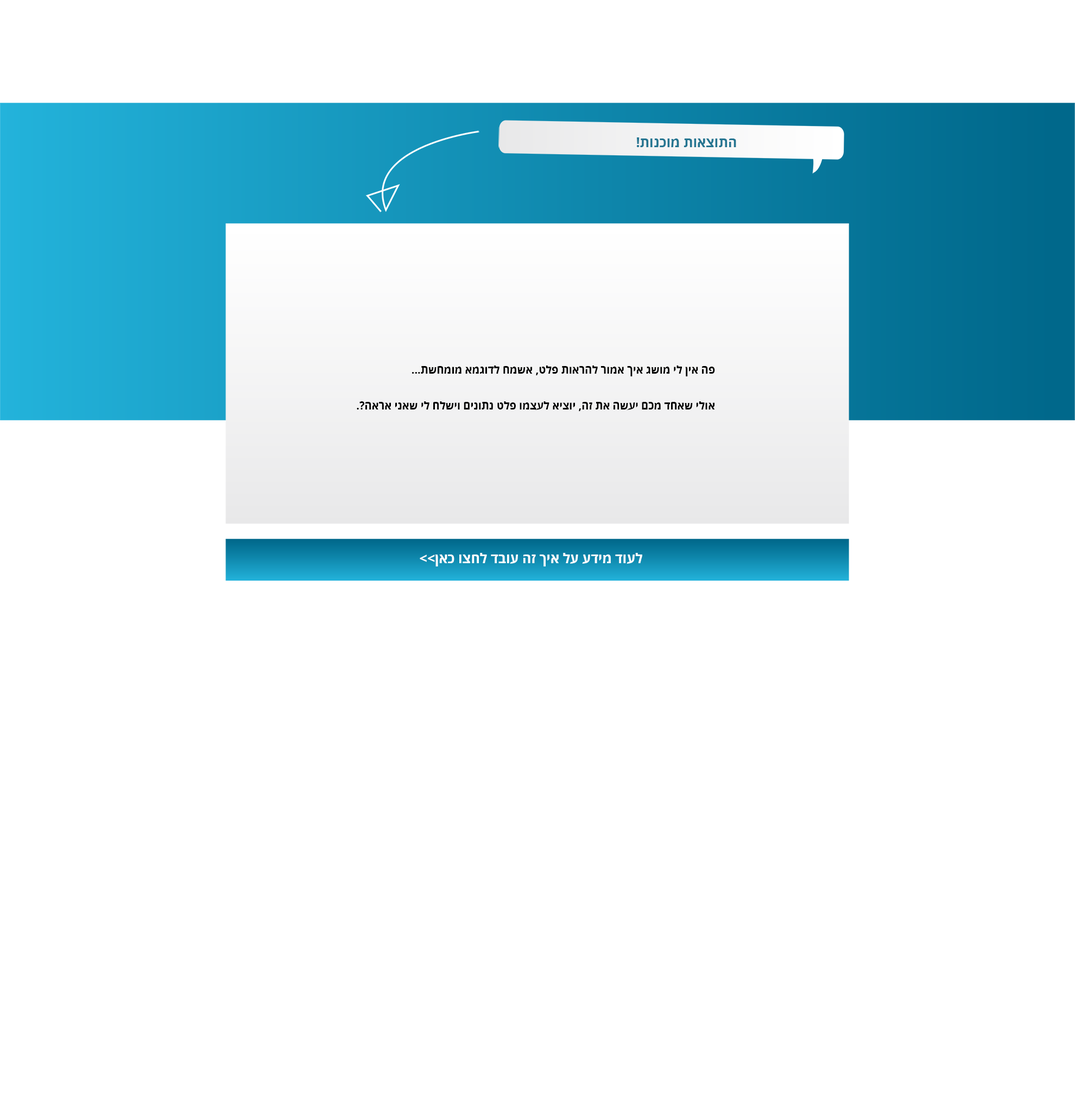
<style>
.page{position:relative;width:1075px;height:1109px;background:#ffffff}
.page>*{position:absolute;margin:0}
.t1{font:13.6px "OpenSansHebrew-Bold";color:#247591}
.t2{font:10.9px/35.8px "OpenSansHebrew-Bold";color:#000000}
.t3{font:13.6px "OpenSansHebrew-Bold";color:#ffffff}
</style>
<div class="page">
<p class="t1" style="left:636px;top:137px;width:100px;height:10px">!תונכומ תואצותה</p>
<p class="t2" style="left:357px;top:365px;width:358px;height:46px">פה אין לי מושג איך אמור להראות פלט, אשמח לדוגמא מומחשת...<br>אולי שאחד מכם יעשה את זה, יוציא לעצמו פלט נתונים וישלח לי שאני אראה?.</p>
<p class="t3" style="left:420px;top:553px;width:222px;height:13px">לעוד מידע על איך זה עובד לחצו כאן&gt;&gt;</p>
</div>
